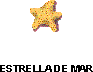
<style>
.page{position:relative;width:93px;height:72px;background:#ffffff}
.page>*{position:absolute;margin:0}
.t1{font:10.3px "Arial-BoldMT";color:#000000;scale:1.03 1}
</style>
<div class="page">
<p class="t1" style="left:0px;top:65px;width:93px;height:7px">ESTRELLA DE MAR</p>
</div>
